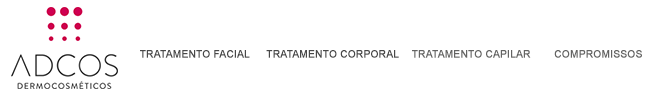
<style>
.page{position:relative;width:650px;height:100px;background:#ffffff}
.page>*{position:absolute;margin:0}
.t1{font:10.3px "ArialMT";color:#484848;font-weight:bold}
.t2{font:10.3px "ArialMT";color:#646463;font-weight:bold}
</style>
<div class="page">
<p class="t1" style="left:140px;top:50px;width:110px;height:8px">TRATAMENTO FACIAL</p>
<p class="t1" style="left:266px;top:50px;width:133px;height:8px">TRATAMENTO CORPORAL</p>
<p class="t2" style="left:412px;top:50px;width:119px;height:8px">TRATAMENTO CAPILAR</p>
<p class="t2" style="left:554px;top:50px;width:88px;height:8px">COMPROMISSOS</p>
</div>
